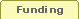
<style>
.page{position:relative;width:79px;height:19px;background:#fbfbb9}
.page>*{position:absolute;margin:0}
.t1{font:9px "Arial-BoldMT";letter-spacing:0.05em;color:#666666;font-weight:bold}
</style>
<div class="page">
<p class="t1" style="left:17px;top:6px;width:46px;height:9px">Funding</p>
</div>
